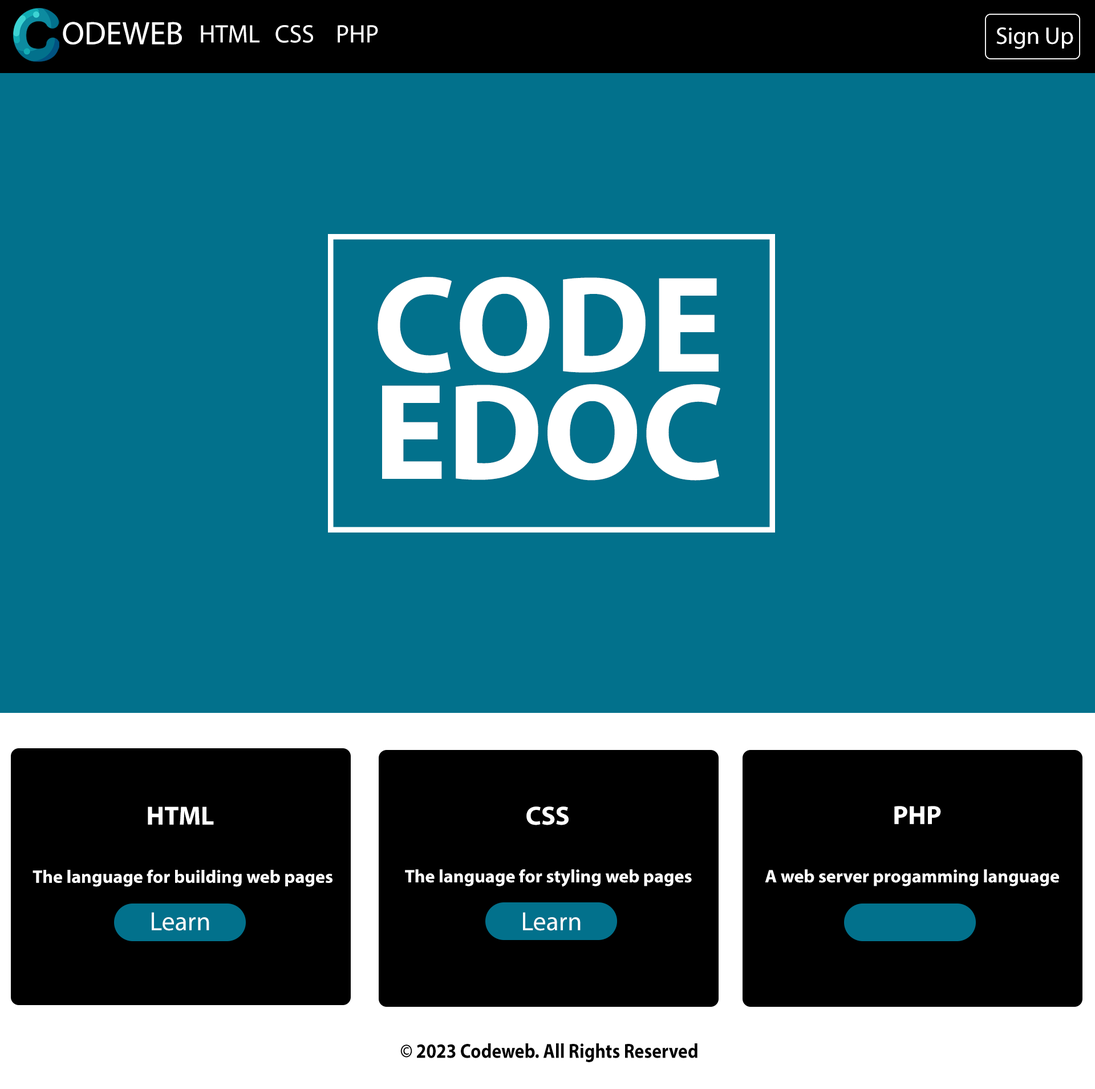
<style>
.page{position:relative;width:1095px;height:1089px;background:#02718c}
.page>*{position:absolute;margin:0}
.t1{font:32.5px "MyriadPro-Regular";color:#ffffff}
.t2{font:25.1px "MyriadPro-Regular";color:#ffffff}
.t3{font:24px "MyriadPro-Regular";color:#ffffff}
.t4{font:138px/107.3px "MyriadPro-Bold";color:#ffffff}
.t5{font:26.2px "MyriadPro-Bold";color:#ffffff}
.t6{font:18.3px "MyriadPro-Bold";color:#ffffff}
.t7{font:26.2px "MyriadPro-Regular";color:#fbfbfb}
.t8{font:20.5px "MyriadPro-Bold";color:#000000;scale:0.88 1}
</style>
<div class="page">
<p class="t1" style="left:63px;top:22px;width:119px;height:23px">ODEWEB</p>
<p class="t2" style="left:201px;top:25px;width:59px;height:18px">HTML</p>
<p class="t2" style="left:276px;top:25px;width:37px;height:18px">CSS</p>
<p class="t2" style="left:338px;top:25px;width:40px;height:18px">PHP</p>
<p class="t3" style="left:997px;top:27px;width:77px;height:22px">Sign Up</p>
<p class="t4" style="left:378px;top:277px;width:343px;height:203px;text-align:center">CODE<br>EDOC</p>
<p class="t5" style="left:148px;top:806px;width:66px;height:18px">HTML</p>
<p class="t5" style="left:527px;top:806px;width:42px;height:19px">CSS</p>
<p class="t5" style="left:895px;top:806px;width:46px;height:18px">PHP</p>
<p class="t6" style="left:33px;top:869px;width:300px;height:18px">The language for building web pages</p>
<p class="t6" style="left:405px;top:869px;width:287px;height:18px">The language for styling web pages</p>
<p class="t6" style="left:765px;top:869px;width:294px;height:17px">A web server progamming language</p>
<p class="t7" style="left:152px;top:912px;width:57px;height:19px">Learn</p>
<p class="t7" style="left:523px;top:912px;width:58px;height:19px">Learn</p>
<p class="t8" style="left:401px;top:1043px;width:297px;height:19px">© 2023 Codeweb. All Rights Reserved</p>
</div>
